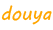
<style>
.page{position:relative;width:53px;height:30px;background:#ffffff}
.page>*{position:absolute;margin:0}
.t1{font:19px "MVBoli";color:#ffa500}
</style>
<div class="page">
<p class="t1" style="left:1px;top:5px;width:51px;height:20px">douya</p>
</div>
